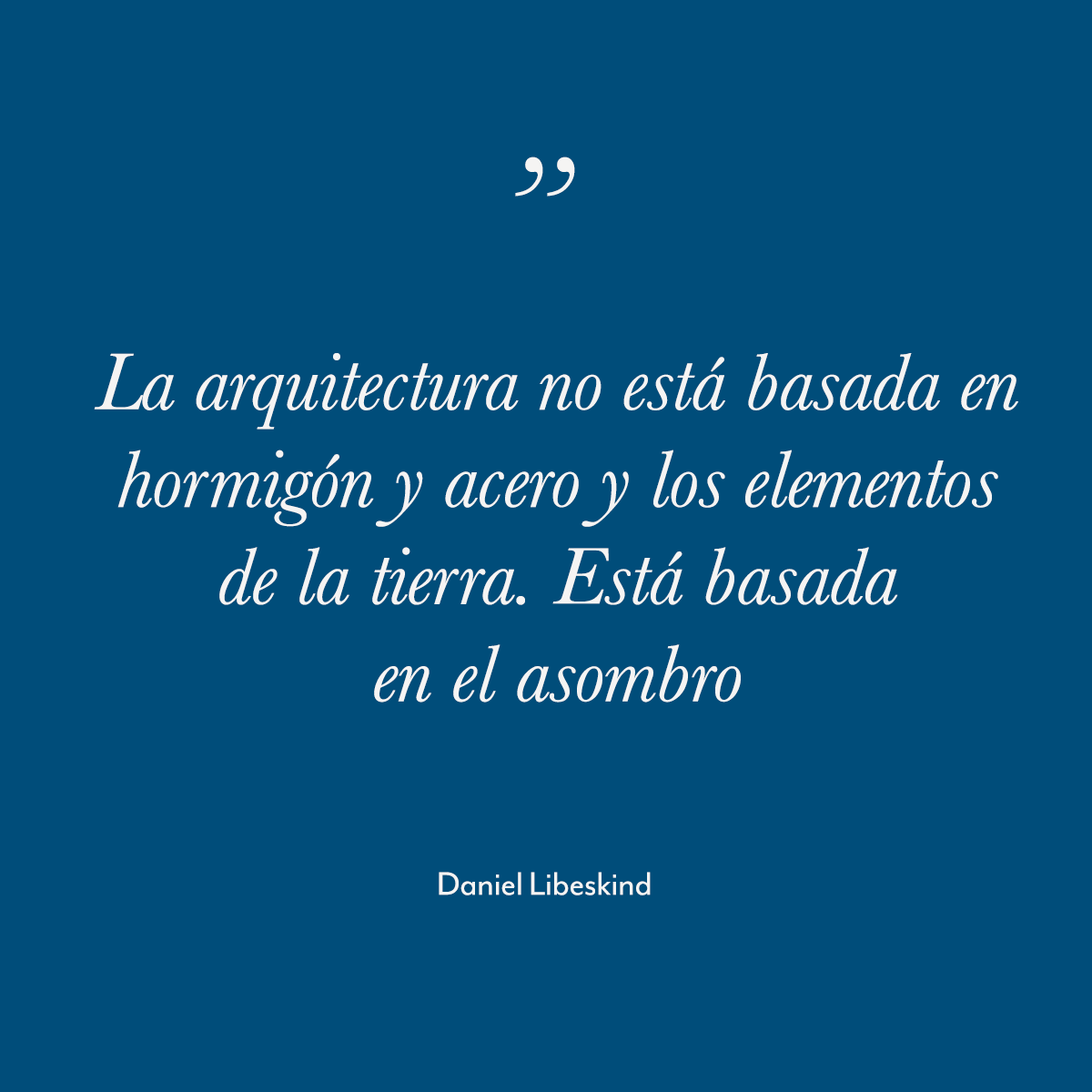
<style>
.page{position:relative;width:1092px;height:1092px;background:#004d7a}
.page>*{position:absolute;margin:0}
.t1{font:144.1px "Baskerville-Italic";letter-spacing:-0.01em;color:#f5f4f3}
.t2{font:83.4px/97.2px "Baskerville-Italic";letter-spacing:-0.01em;color:#f5f4f3}
.t3{font:37.1px "MrEavesModOT-Reg";letter-spacing:-0.01em;color:#f5f4f3}
</style>
<div class="page">
<p class="t1" style="left:515px;top:157px;width:60px;height:40px">”</p>
<p class="t2" style="left:94px;top:353px;width:924px;height:350px;text-align:center">La arquitectura no está basada en<br>hormigón y acero y los elementos<br>de la tierra. Está basada<br>en el asombro</p>
<p class="t3" style="left:439px;top:872px;width:212px;height:23px">Daniel Libeskind</p>
</div>
